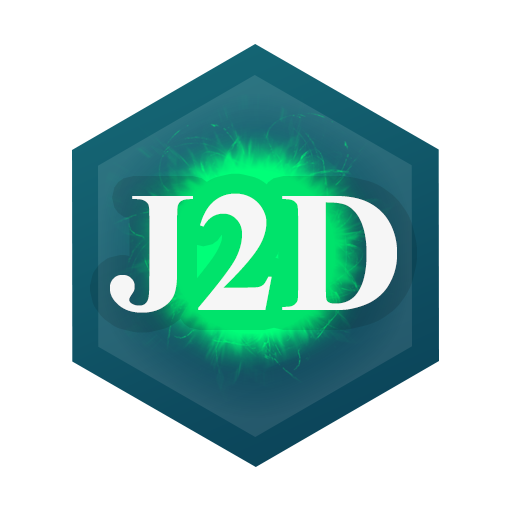
<style>
.page{position:relative;width:512px;height:512px;background:#ffffff}
.page>*{position:absolute;margin:0}
.t1{font:172px "TimesNewRomanPS-BoldMT";color:#f6f6f6}
</style>
<div class="page">
<p class="t1" style="left:110px;top:193px;width:287px;height:120px">J2D</p>
</div>
